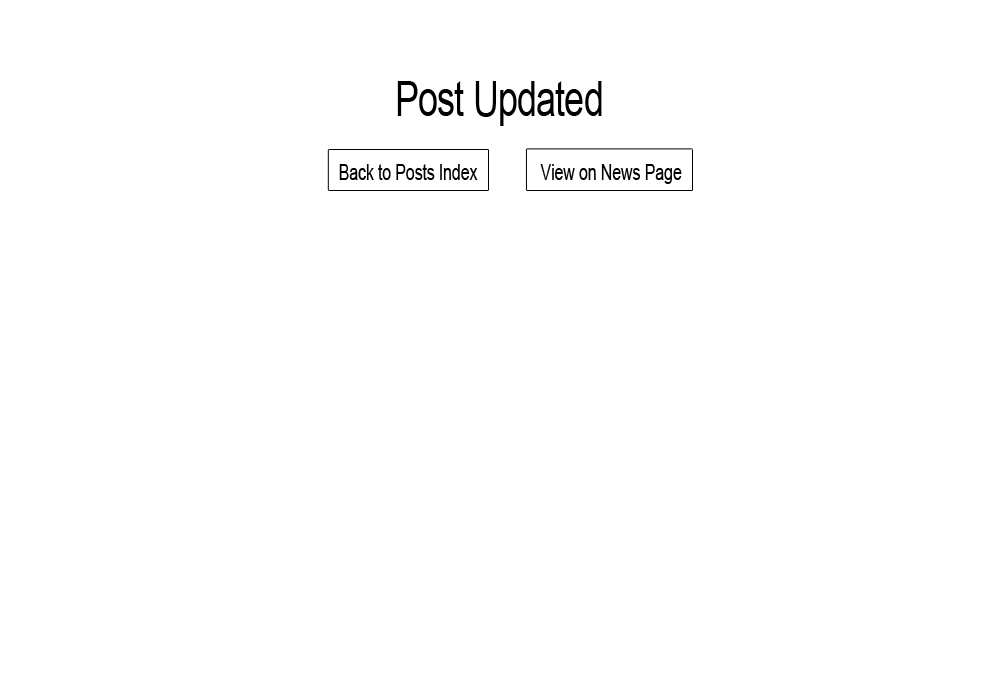
<style>
.page{position:relative;width:1000px;height:700px;background:#ffffff}
.page>*{position:absolute;margin:0}
.t1{font:48.7px "ArialMT";letter-spacing:-0.02em;color:#000000;scale:0.73 1}
.t2{font:22.3px "ArialMT";letter-spacing:-0.02em;color:#000000;scale:0.73 1}
</style>
<div class="page">
<p class="t1" style="left:397px;top:81px;width:205px;height:45px">Post Updated</p>
<p class="t2" style="left:339px;top:164px;width:139px;height:16px">Back to Posts Index</p>
<p class="t2" style="left:540px;top:164px;width:142px;height:20px">View on News Page</p>
</div>
